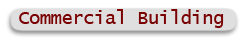
<style>
.page{position:relative;width:245px;height:39px;background:#e0dfdf}
.page>*{position:absolute;margin:0}
.t1{font:19px "LucidaConsole";letter-spacing:-0.02em;color:#790102}
</style>
<div class="page">
<p class="t1" style="left:19px;top:9px;width:205px;height:19px">Commercial Building</p>
</div>
